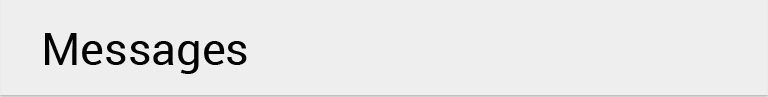
<style>
.page{position:relative;width:768px;height:97px;background:#eeeeee}
.page>*{position:absolute;margin:0}
.t1{font:45px "Roboto-Regular";color:#000000}
</style>
<div class="page">
<p class="t1" style="left:45px;top:33px;width:202px;height:41px">Messages</p>
</div>
